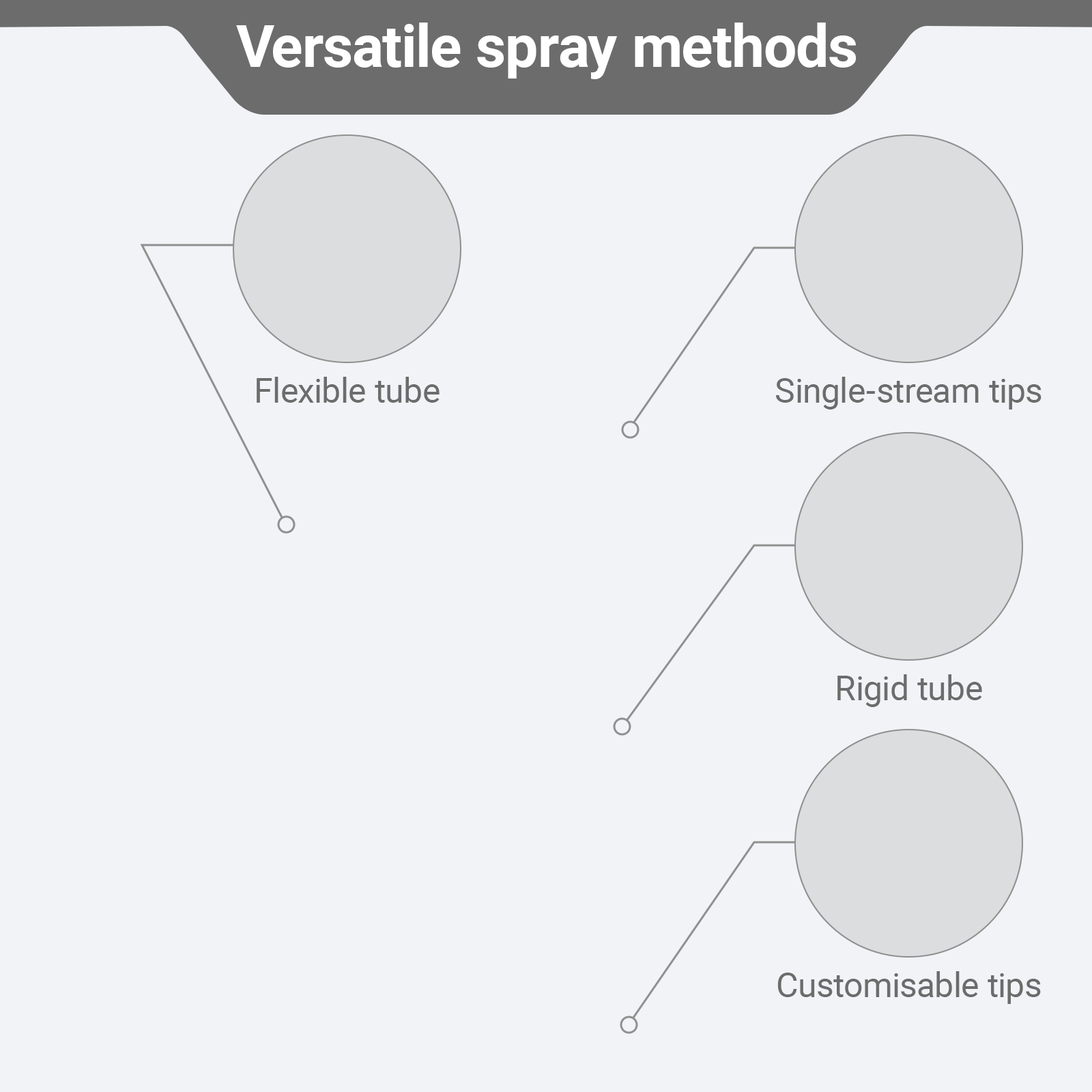
<style>
.page{position:relative;width:1092px;height:1092px;background:#f2f3f6}
.page>*{position:absolute;margin:0}
.t1{font:58.7px "Roboto-Bold";color:#ffffff}
.t2{font:34.1px "Roboto-Regular";color:#6c6c6c}
</style>
<div class="page">
<p class="t1" style="left:236px;top:23px;width:621px;height:56px">Versatile spray methods</p>
<p class="t2" style="left:257px;top:377px;width:183px;height:26px">Flexible tube</p>
<p class="t2" style="left:776px;top:377px;width:265px;height:32px">Single-stream tips</p>
<p class="t2" style="left:837px;top:674px;width:145px;height:33px">Rigid tube</p>
<p class="t2" style="left:777px;top:971px;width:264px;height:33px">Customisable tips</p>
</div>
